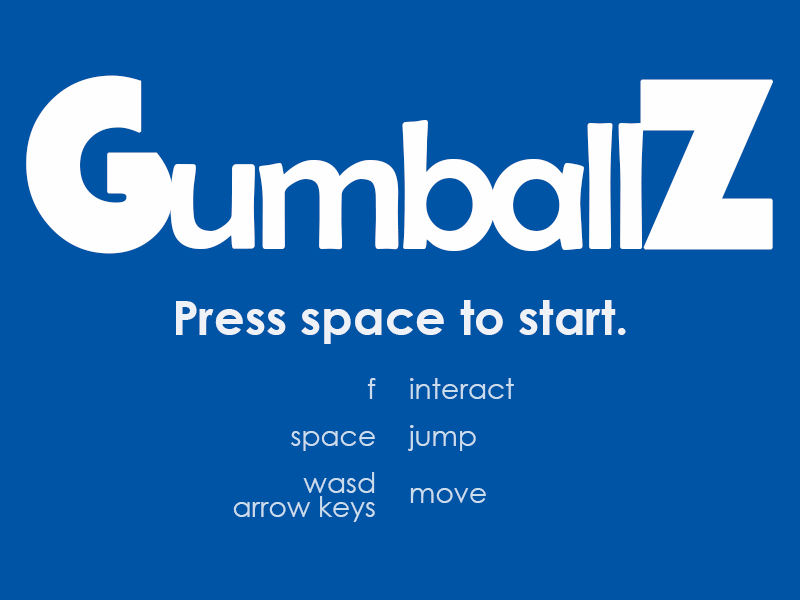
<style>
.page{position:relative;width:800px;height:600px;background:#0054a6}
.page>*{position:absolute;margin:0}
.t1{font:180.8px "BerlinSansFB-Reg";letter-spacing:-0.075em;color:#fefefe;font-weight:bold}
.t2{font:251.2px "Bauhaus93";letter-spacing:-0.075em;color:#fefefe;font-weight:bold}
.t3{font:48px "CenturyGothic-Bold";color:#fefefe}
.t4{font:28px/47px "CenturyGothic";color:#cbdcec}
.t5{font:28px/24px "CenturyGothic";color:#cbdcec}
.t6{font:28px/57px "CenturyGothic";color:#cbdcec}
</style>
<div class="page">
<p class="t1" style="left:26px;top:75px;width:748px;height:179px"><span class="t2">G</span>umball<span class="t2">Z</span></p>
<p class="t3" style="left:176px;top:300px;width:450px;height:44px;opacity:0.9">Press space to start.</p>
<p class="t4" style="left:233px;top:378px;width:143px;height:144px;text-align:right">f<br>space<br>wasd<br><span class="t5">arrow keys</span></p>
<p class="t4" style="left:408px;top:378px;width:106px;height:125px">interact<br>jump<br><span class="t6">move</span></p>
</div>
